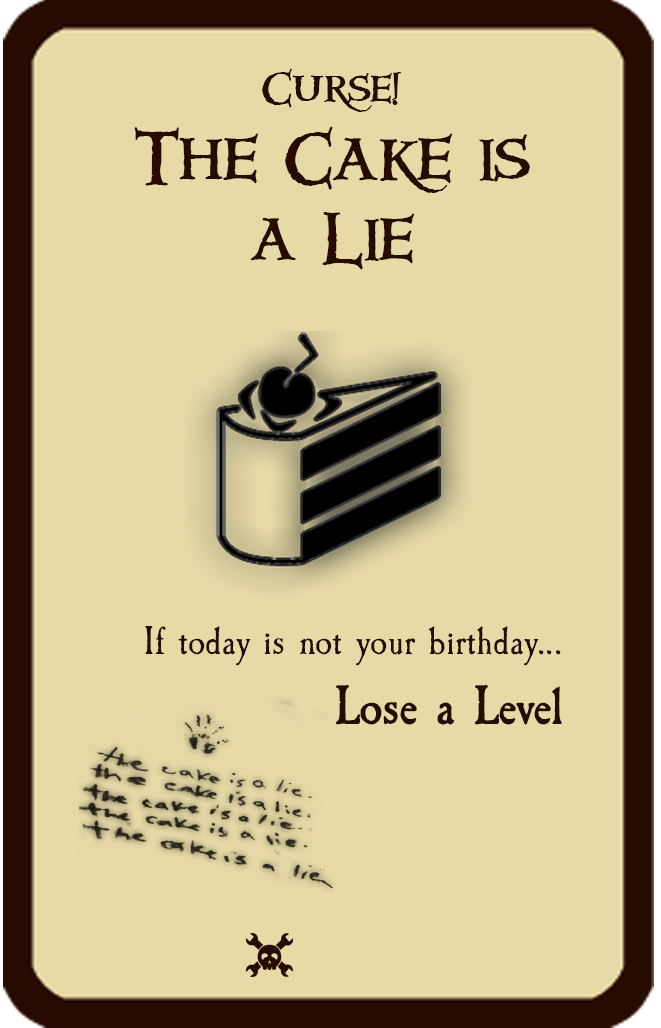
<style>
.page{position:relative;width:661px;height:1028px;background:#e7daa7}
.page>*{position:absolute;margin:0}
.t1{font:66.7px "Windlass";color:#270b00}
.t2{font:41.7px "Windlass";color:#270b00}
.t3{font:41.7px "CaslonAntique";color:#270b00}
.t4{font:58.3px "CaslonAntique-Bold";color:#270b00}
</style>
<div class="page">
<p class="t1" style="left:134px;top:68px;width:396px;height:202px;text-align:center"><span class="t2">Curse!<br></span>The Cake is a Lie</p>
<p class="t3" style="left:145px;top:626px;width:417px;height:99px;text-align:right">If today is not your birthday...<br><span class="t4">Lose a Level</span></p>
</div>
